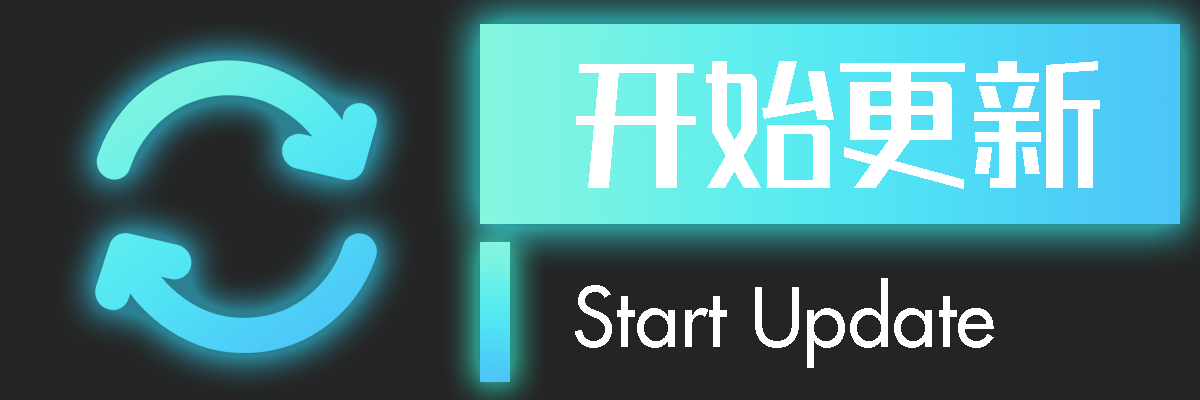
<style>
.page{position:relative;width:1200px;height:400px;background:#242424}
.page>*{position:absolute;margin:0}
.t1{font:133.3px "REEJIZhenyanGB20GX-Medium";color:#ffffff}
.t2{font:80px "Futura-Medium";color:#ffffff}
</style>
<div class="page">
<p class="t1" style="left:576px;top:61px;width:524px;height:128px">开始更新</p>
<p class="t2" style="left:575px;top:278px;width:419px;height:90px">Start Update</p>
</div>
